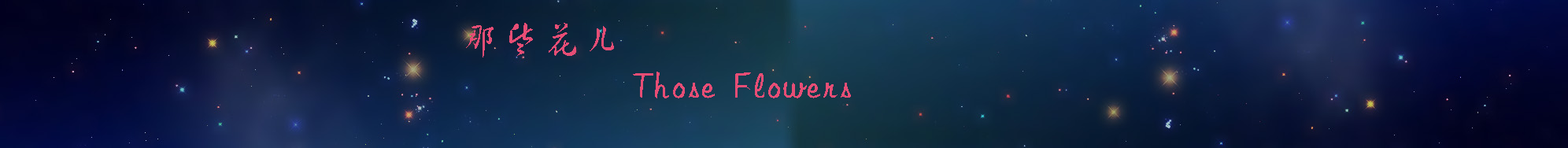
<style>
.page{position:relative;width:1568px;height:148px}
.page>*{position:absolute;margin:0}
.t1{font:39.4px "FZHCJW--GB1-0";letter-spacing:0.025em;color:#e74d75}
</style>
<div class="page">
<p class="t1" style="left:466px;top:23px;width:148px;height:34px">那些花儿</p>
<p class="t1" style="left:633px;top:72px;width:218px;height:26px">Those  Flowers</p>
</div>
